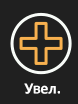
<style>
.page{position:relative;width:78px;height:104px;background:#202020}
.page>*{position:absolute;margin:0}
.t1{font:12px "Calibri-Bold";color:#ffffff}
</style>
<div class="page">
<p class="t1" style="left:24px;top:83px;width:36px;height:11px">Увел.</p>
</div>
